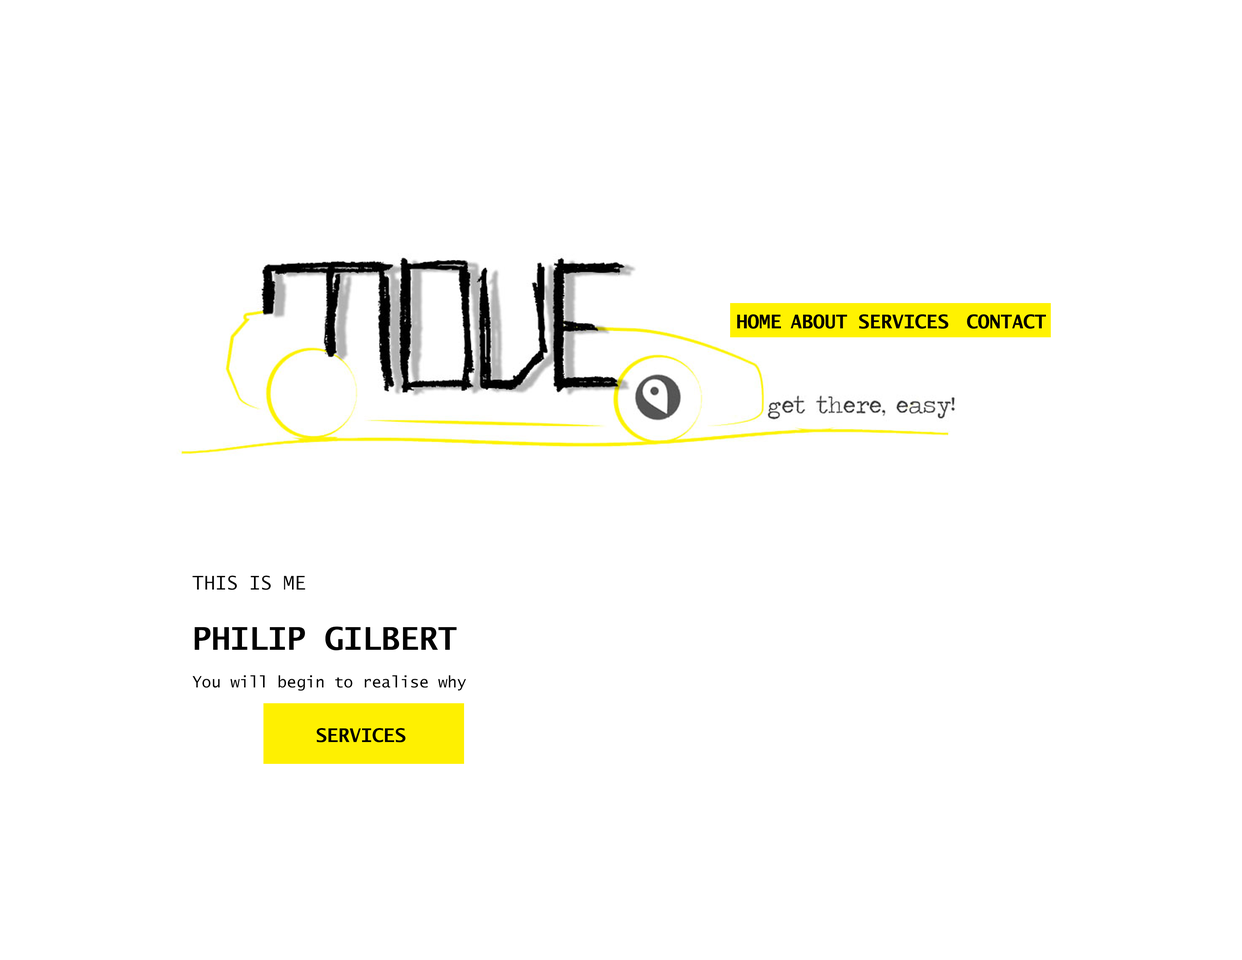
<style>
.page{position:relative;width:1242px;height:960px;background:#ffffff}
.page>*{position:absolute;margin:0}
.t1{font:18.8px "LucidaSans-TypewriterBold";color:#000000}
.t2{font:15.7px "LucidaSans-Typewriter";color:#000000}
.t3{font:4.5px "LucidaSans-Typewriter";color:#000000}
.t4{font:31.4px "LucidaSans-TypewriterBold";color:#000000}
</style>
<div class="page">
<p class="t1" style="left:737px;top:314px;width:309px;height:15px">HOME ABOUT SERVICES  CONTACT</p>
<p class="t2" style="left:192px;top:576px;width:274px;height:115px"><span class="t3">THIS IS ME<br><br></span><span class="t4">PHILIP GILBERT<br><br></span>You will begin to realise why</p>
<p class="t1" style="left:317px;top:728px;width:89px;height:14px">SERVICES</p>
</div>
